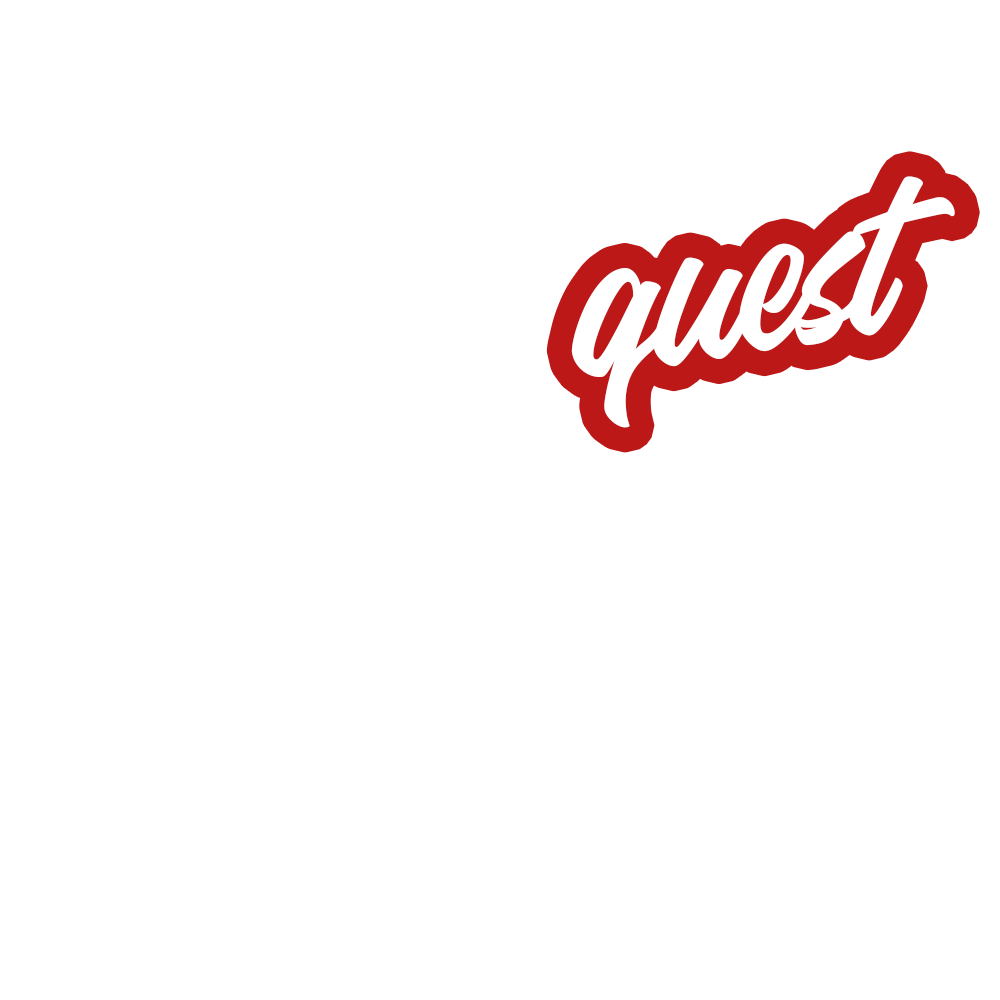
<style>
.page{position:relative;width:1000px;height:1000px;background:#ffffff}
.page>*{position:absolute;margin:0}
.t1{font:196.5px "BackhillFreeVersion";color:#ffffff}
</style>
<div class="page">
<p class="t1" style="left:571px;top:176px;width:384px;height:252px;rotate:-9deg">quest</p>
</div>
